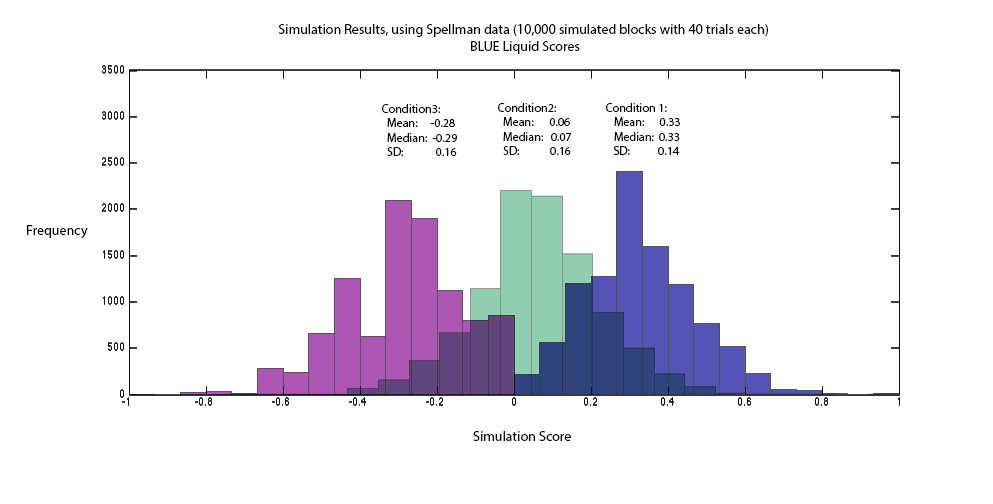
<style>
.page{position:relative;width:993px;height:504px;background:#ffffff}
.page>*{position:absolute;margin:0}
.t1{font:14px "MyriadPro-Regular";color:#000000}
.t2{font:12px "MyriadPro-Regular";color:#000000}
</style>
<div class="page">
<p class="t1" style="left:278px;top:24px;width:490px;height:30px;text-align:center">Simulation Results, using Spellman data (10,000 simulated blocks with 40 trials each) <br>BLUE Liquid Scores</p>
<p class="t2" style="left:382px;top:104px;width:75px;height:52px">Condition3:<br>  Mean:     -0.28<br>  Median:  -0.29<br>  SD:         0.16</p>
<p class="t2" style="left:498px;top:103px;width:74px;height:52px">Condition2:<br>  Mean:       0.06<br>  Median:   0.07<br>  SD:            0.16</p>
<p class="t2" style="left:606px;top:103px;width:74px;height:52px">Condition 1:<br>   Mean:      0.33<br>   Median:  0.33<br>   SD:           0.14</p>
<p class="t1" style="left:27px;top:225px;width:61px;height:13px">Frequency</p>
<p class="t1" style="left:473px;top:431px;width:98px;height:10px">Simulation Score</p>
</div>
